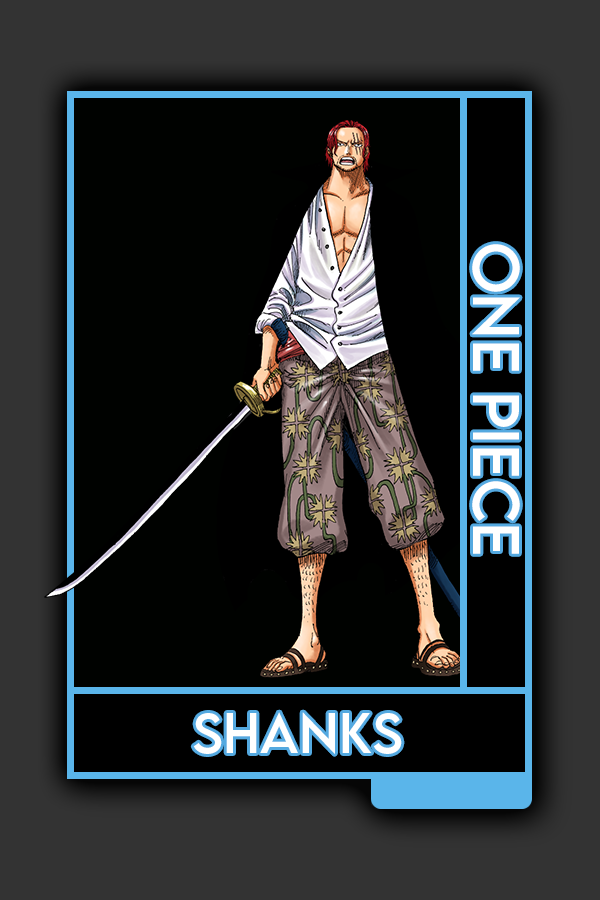
<style>
.page{position:relative;width:600px;height:900px;background:#000200}
.page>*{position:absolute;margin:0}
.t1{font:58.4px "LEMONMILK-Regular";color:#ffffff}
.t2{font:50.5px "LEMONMILK-Regular";color:#ffffff}
</style>
<div class="page">
<p class="t1" style="left:472px;top:244px;width:48px;height:310px;rotate:90deg">One Piece</p>
<p class="t2" style="left:193px;top:712px;width:209px;height:42px">Shanks</p>
</div>
